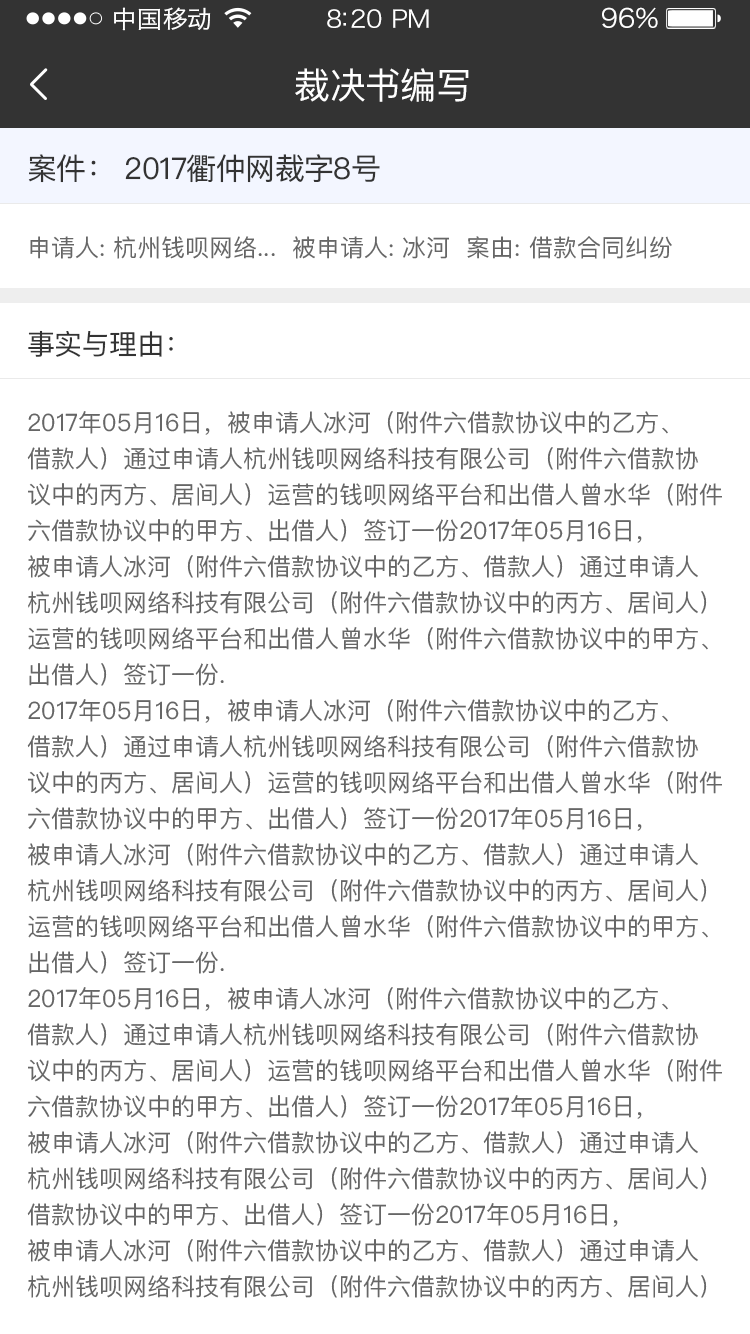
<style>
.page{position:relative;width:750px;height:1334px;background:#ffffff}
.page>*{position:absolute;margin:0}
.t1{font:24px "HiraginoSansGB-W3";letter-spacing:0.02em;color:#ffffff;scale:1.03 1}
.t2{font:24px "HiraginoSansGB-W3";letter-spacing:-0.02em;color:#ffffff;scale:1.03 1}
.t3{font:26.2px "HiraginoSansGB-W3";letter-spacing:-0.02em;color:#ffffff;scale:1.03 1}
.t4{font:36px "PingFangSC-Regular";letter-spacing:-0.02em;color:#ffffff}
.t5{font:30px "PingFangSC-Regular";letter-spacing:-0.02em;color:#333333}
.t6{font:24px "PingFangSC-Regular";color:#666666}
.t7{font:28px "PingFangSC-Regular";letter-spacing:-0.02em;color:#333333}
.t8{font:24px/36px "PingFangSC-Regular";color:#666666}
</style>
<div class="page">
<p class="t1" style="left:114px;top:7px;width:97px;height:24px">中国移动</p>
<p class="t2" style="left:327px;top:9px;width:102px;height:19px">8:20 PM</p>
<p class="t3" style="left:602px;top:7px;width:56px;height:22px">96%</p>
<p class="t4" style="left:295px;top:68px;width:174px;height:34px">裁决书编写</p>
<p class="t5" style="left:28px;top:154px;width:352px;height:29px">案件： 2017衢仲网裁字8号</p>
<p class="t6" style="left:30px;top:236px;width:642px;height:23px">申请人: 杭州钱呗网络...  被申请人: 冰河  案由: 借款合同纠纷</p>
<p class="t7" style="left:28px;top:330px;width:145px;height:27px">事实与理由：</p>
<p class="t8" style="left:27px;top:411px;width:695px;height:887px">2017年05月16日，被申请人冰河（附件六借款协议中的乙方、<br>借款人）通过申请人杭州钱呗网络科技有限公司（附件六借款协<br>议中的丙方、居间人）运营的钱呗网络平台和出借人曾水华（附件<br>六借款协议中的甲方、出借人）签订一份2017年05月16日，<br>被申请人冰河（附件六借款协议中的乙方、借款人）通过申请人<br>杭州钱呗网络科技有限公司（附件六借款协议中的丙方、居间人）<br>运营的钱呗网络平台和出借人曾水华（附件六借款协议中的甲方、<br>出借人）签订一份.<br>2017年05月16日，被申请人冰河（附件六借款协议中的乙方、<br>借款人）通过申请人杭州钱呗网络科技有限公司（附件六借款协<br>议中的丙方、居间人）运营的钱呗网络平台和出借人曾水华（附件<br>六借款协议中的甲方、出借人）签订一份2017年05月16日，<br>被申请人冰河（附件六借款协议中的乙方、借款人）通过申请人<br>杭州钱呗网络科技有限公司（附件六借款协议中的丙方、居间人）<br>运营的钱呗网络平台和出借人曾水华（附件六借款协议中的甲方、<br>出借人）签订一份.<br>2017年05月16日，被申请人冰河（附件六借款协议中的乙方、<br>借款人）通过申请人杭州钱呗网络科技有限公司（附件六借款协<br>议中的丙方、居间人）运营的钱呗网络平台和出借人曾水华（附件<br>六借款协议中的甲方、出借人）签订一份2017年05月16日，<br>被申请人冰河（附件六借款协议中的乙方、借款人）通过申请人<br>杭州钱呗网络科技有限公司（附件六借款协议中的丙方、居间人）<br>借款协议中的甲方、出借人）签订一份2017年05月16日，<br>被申请人冰河（附件六借款协议中的乙方、借款人）通过申请人<br>杭州钱呗网络科技有限公司（附件六借款协议中的丙方、居间人）</p>
</div>
